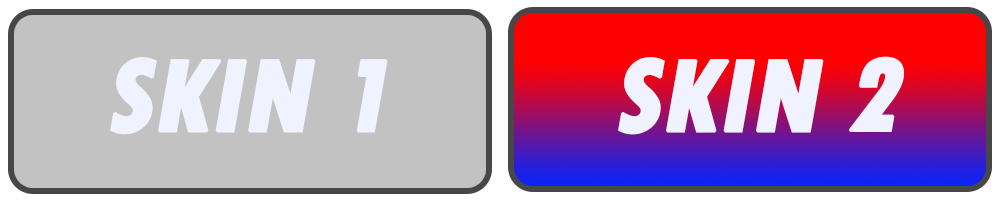
<style>
.page{position:relative;width:1000px;height:200px;background:#c2c2c2}
.page>*{position:absolute;margin:0}
.t1{font:108.2px "TwCenMT-CondensedExtraBold";letter-spacing:-0.02em;color:#f0f2ff;text-transform:uppercase;font-weight:bold;font-style:italic}
</style>
<div class="page">
<p class="t1" style="left:110px;top:57px;width:278px;height:78px">skin 1</p>
<p class="t1" style="left:618px;top:56px;width:286px;height:79px">skin 2</p>
</div>
